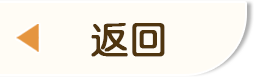
<style>
.page{position:relative;width:254px;height:77px;background:#fffcf5}
.page>*{position:absolute;margin:0}
.t1{font:38px "ç»å¸ä¸­åç®-regular";color:#50350f;font-weight:bold}
</style>
<div class="page">
<p class="t1" style="left:91px;top:23px;width:74px;height:34px">返回</p>
</div>
